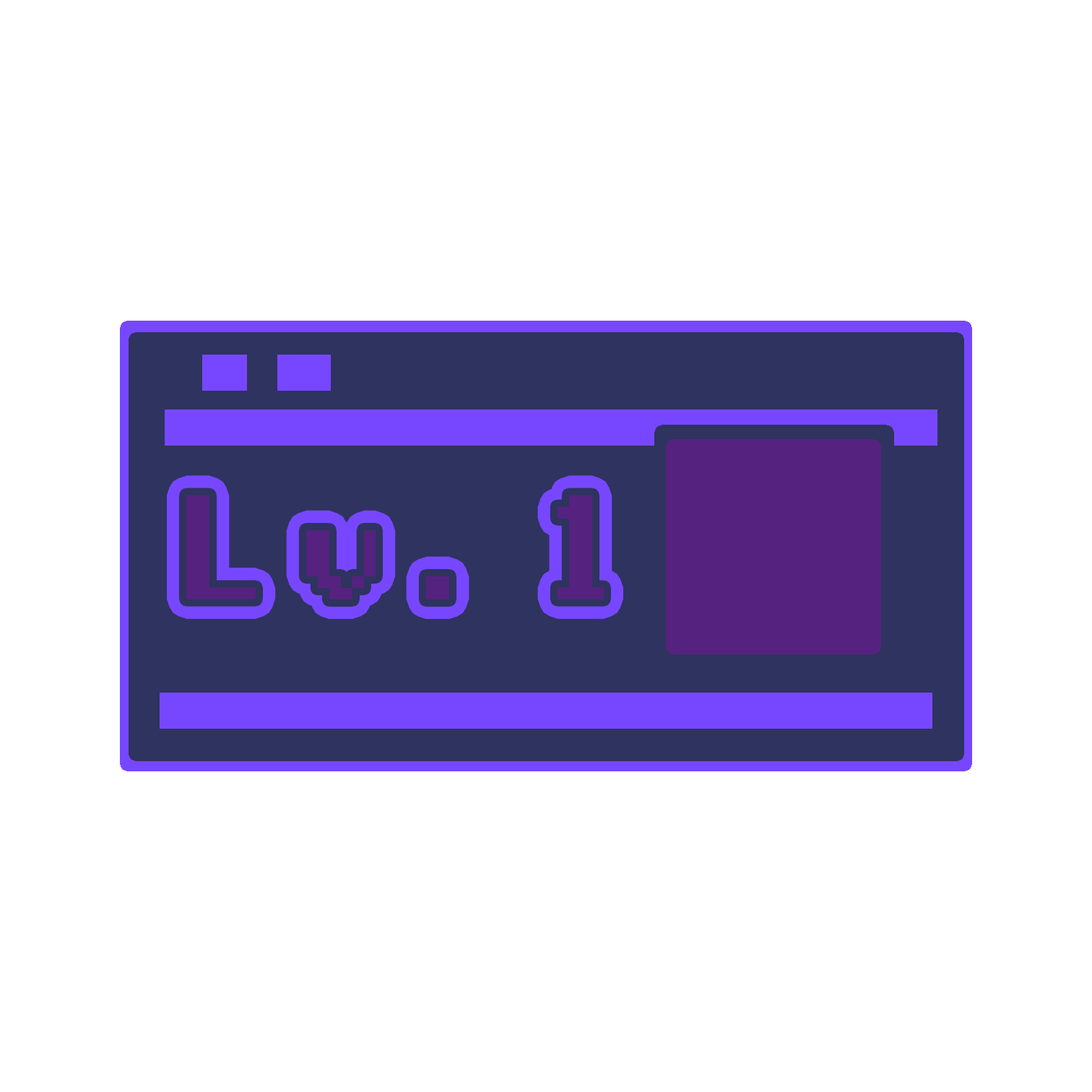
<style>
.page{position:relative;width:1092px;height:1092px;background:#ffffff}
.page>*{position:absolute;margin:0}
.t1{font:138.4px "ManaspaceReg";letter-spacing:0.2em;color:#56227f}
</style>
<div class="page">
<p class="t1" style="left:186px;top:495px;width:418px;height:104px">Lv.1</p>
<p class="t1" style="left:186px;top:495px;width:418px;height:104px">Lv.1</p>
</div>
